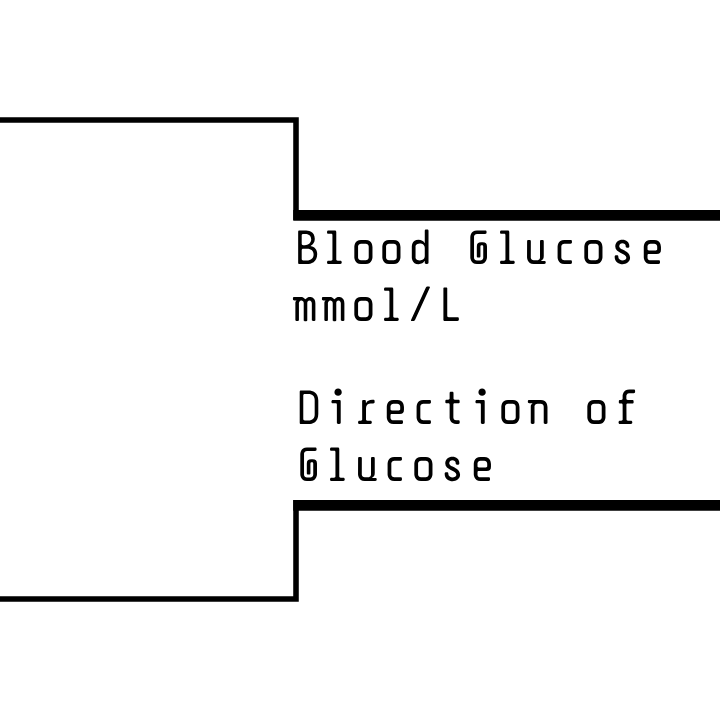
<style>
.page{position:relative;width:720px;height:720px;background:#ffffff}
.page>*{position:absolute;margin:0}
.t1{font:48px "DPSDbeyond";color:#000000}
</style>
<div class="page">
<p class="t1" style="left:292px;top:229px;width:369px;height:93px">Blood Glucose<br>mmol/L</p>
<p class="t1" style="left:299px;top:388px;width:337px;height:94px">Direction of<br>Glucose</p>
</div>
